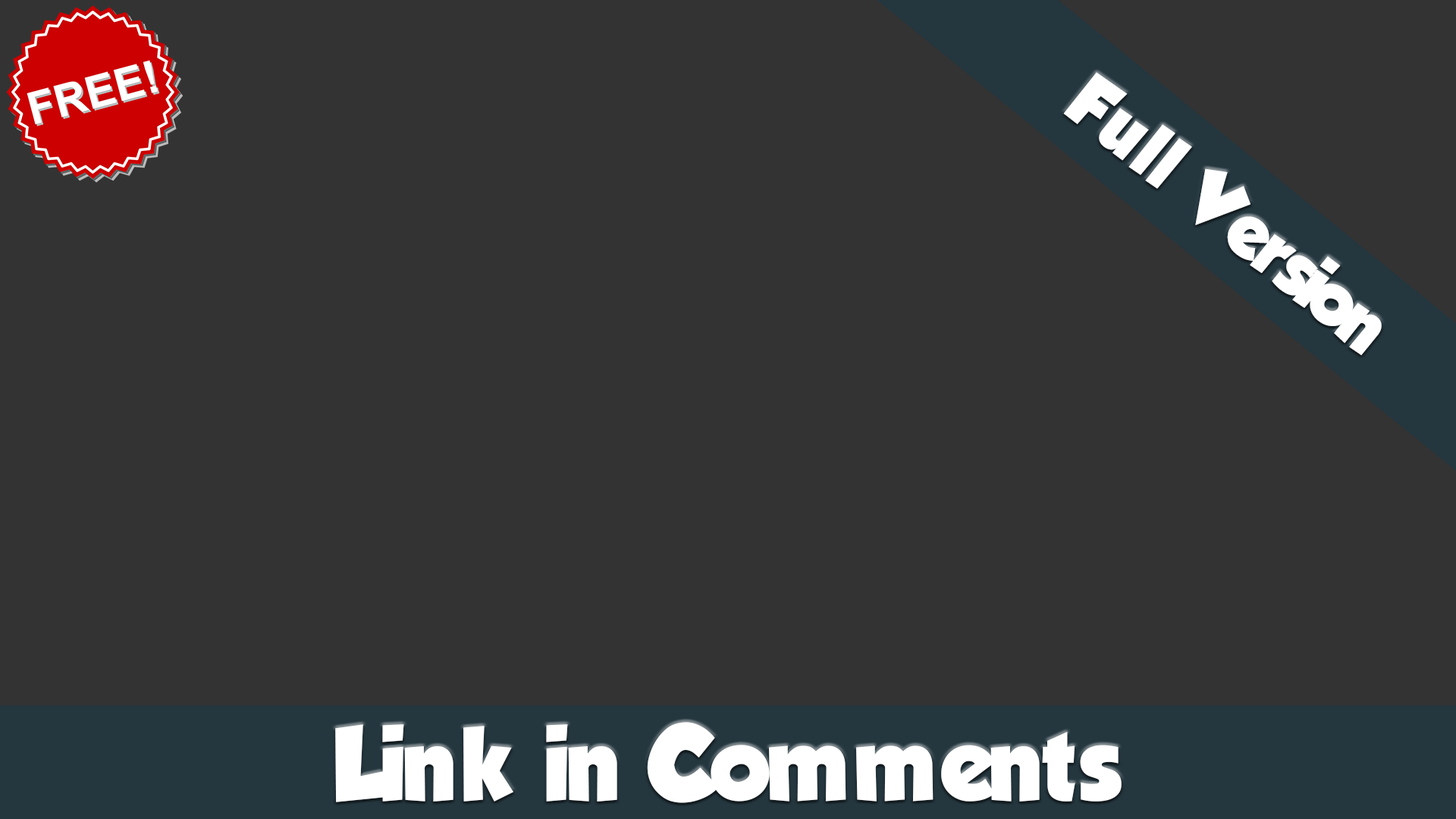
<style>
.page{position:relative;width:1456px;height:819px;background:#333333}
.page>*{position:absolute;margin:0}
.t1{font:83.4px "TadeoFont-Bold";color:#ffffff}
.t2{font:113.7px "TadeoFont-Bold";color:#ffffff}
</style>
<div class="page">
<p class="t1" style="left:1063px;top:72px;width:319px;height:284px;rotate:39deg">Full Version</p>
<p class="t2" style="left:335px;top:722px;width:787px;height:81px">Link in Comments</p>
</div>
